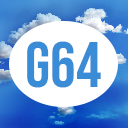
<style>
.page{position:relative;width:128px;height:128px;background:#ffffff}
.page>*{position:absolute;margin:0}
.t1{font:64px "BebasNeue-Regular";color:#3b8cd7}
</style>
<div class="page">
<p class="t1" style="left:27px;top:41px;width:74px;height:47px">G64</p>
</div>
